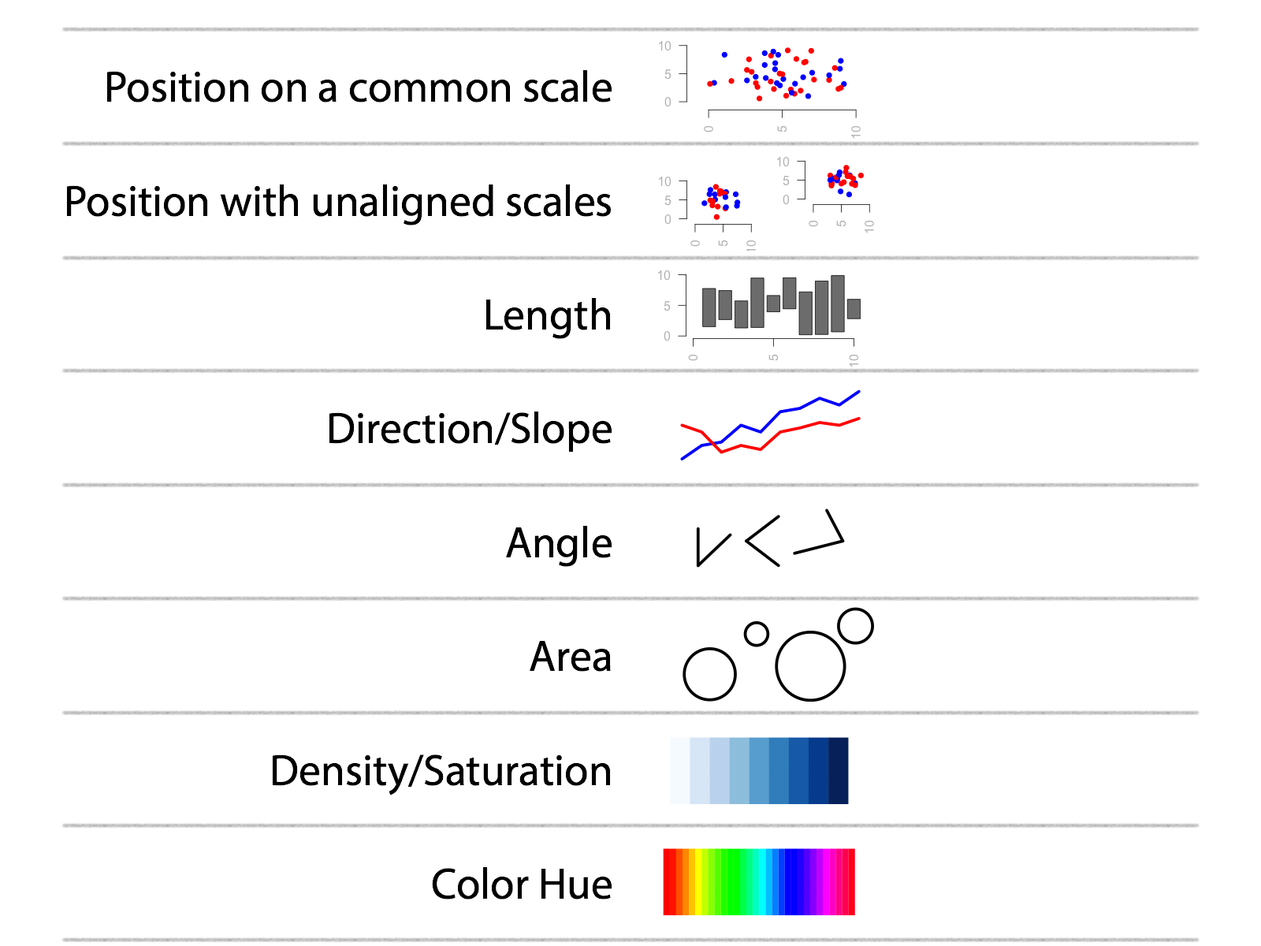
<style>
.page{position:relative;width:1261px;height:946px;background:#ffffff}
.page>*{position:absolute;margin:0}
.t1{font:43.8px "MyriadPro-Regular";color:#000000}
</style>
<div class="page">
<p class="t1" style="left:66px;top:70px;width:546px;height:829px;text-align:right">Position on a common scale<br>Position with unaligned scales<br>Length<br>Direction/Slope<br>Angle<br>Area<br>Density/Saturation<br>Color Hue</p>
</div>
